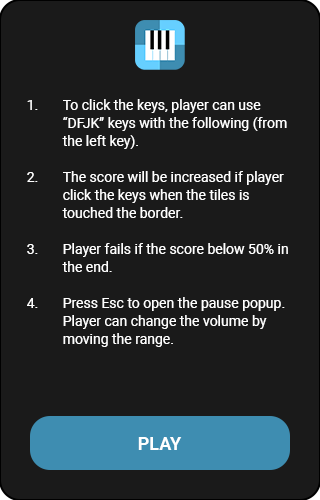
<style>
.page{position:relative;width:320px;height:500px;background:#1a1a1a}
.page>*{position:absolute;margin:0}
.t1{font:14px/18px "Roboto-Regular";color:#ffffff}
.t2{font:18px "Roboto-Bold";color:#ffffff}
</style>
<div class="page">
<p class="t1" style="left:27px;top:99px;width:261px;height:248px">1. To click the keys, player can use<br> “DFJK” keys with the following (from <br> the left key).<br><br>2. The score will be increased if player<br> click the keys when the tiles is <br> touched the border.<br><br>3. Player fails if the score below 50% in <br> the end.<br><br>4. Press Esc to open the pause popup. <br> Player can change the volume by <br> moving the range.</p>
<p class="t2" style="left:138px;top:437px;width:44px;height:13px">PLAY</p>
</div>
